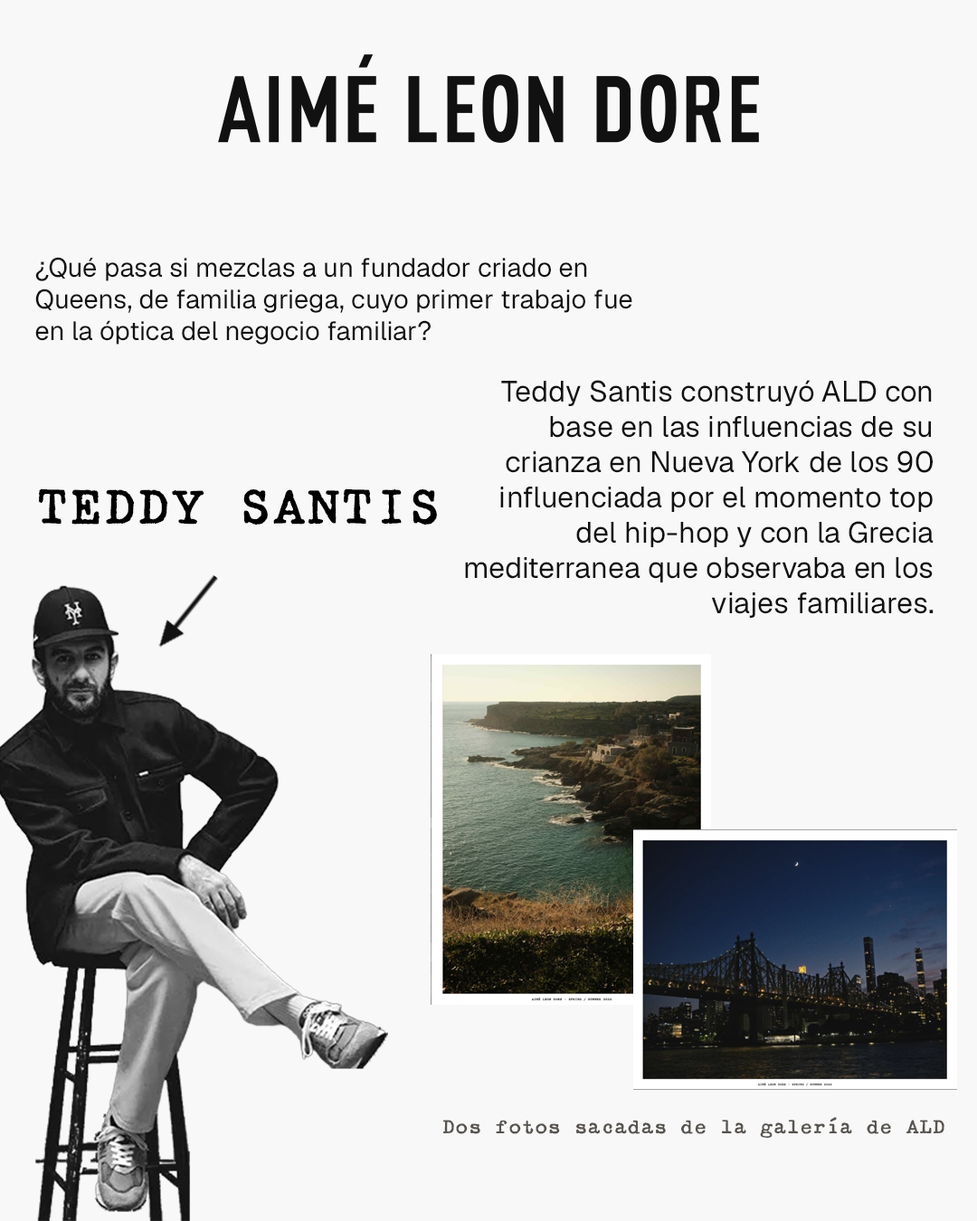
<style>
.page{position:relative;width:977px;height:1221px;background:#f8f8f8}
.page>*{position:absolute;margin:0}
.t1{font:26.4px "Geist-Regular";color:#111111}
.t2{font:29.4px "Geist-Regular";color:#111111}
.t3{font:57.8px "SecretServiceTypewriterRR-Regular";color:#000000}
.t4{font:22.6px "SecretServiceTypewriterRR-Regular";color:#57534e}
</style>
<div class="page">
<p class="t1" style="left:35px;top:257px;width:597px;height:88px">¿Qué pasa si mezclas a un fundador criado en Queens, de familia griega, cuyo primer trabajo fue en la óptica del negocio familiar?</p>
<p class="t2" style="left:465px;top:380px;width:468px;height:238px;text-align:right">Teddy Santis construyó ALD con base en las influencias de su crianza en Nueva York de los 90 influenciada por el momento top del hip-hop y con la Grecia mediterranea que observaba en los viajes familiares.</p>
<p class="t3" style="left:39px;top:488px;width:398px;height:37px">TEDDY SANTIS</p>
<p class="t4" style="left:442px;top:1117px;width:502px;height:21px">Dos fotos sacadas de la galería de ALD</p>
</div>
